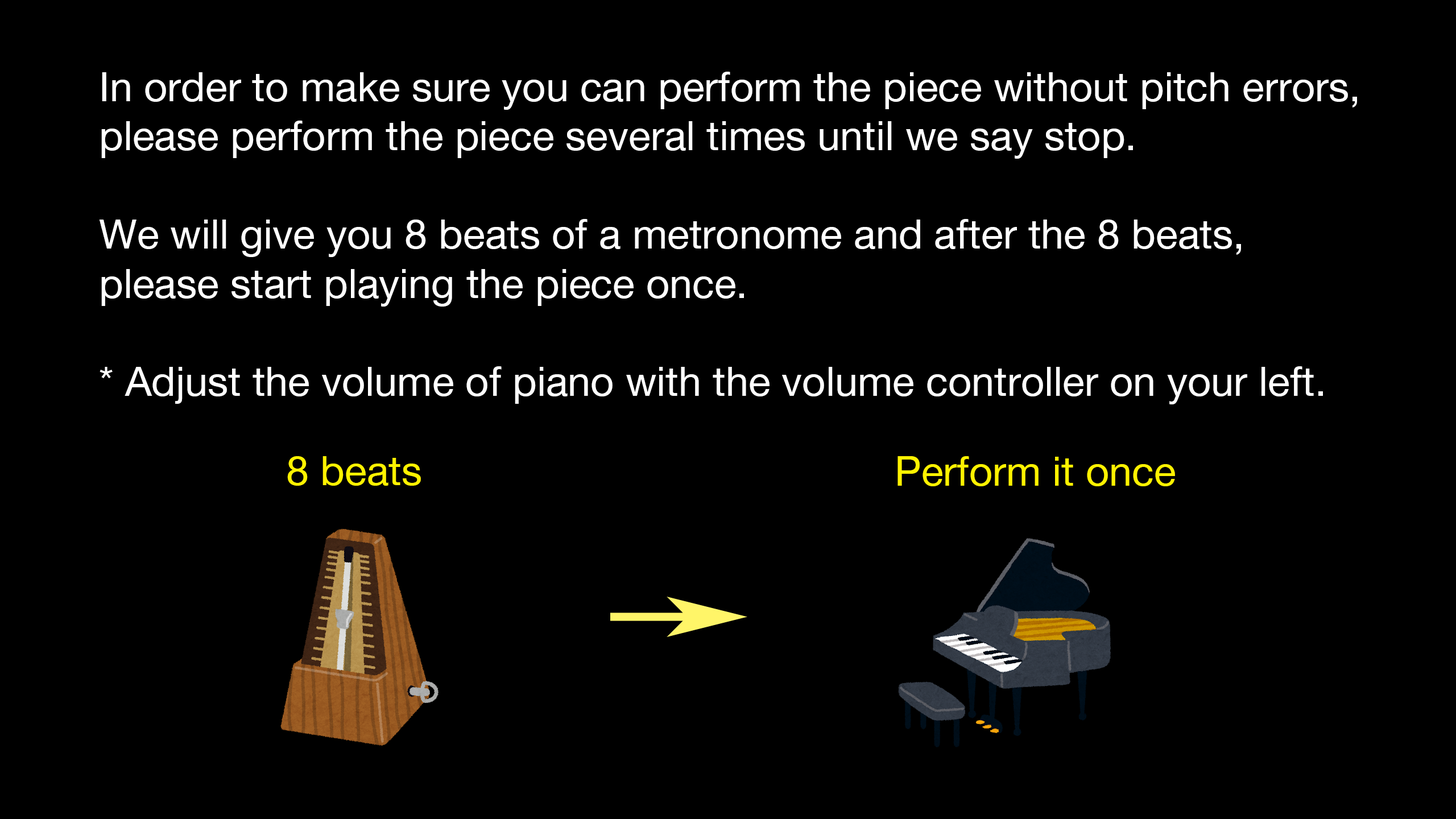
<style>
.page{position:relative;width:1456px;height:819px;background:#000000}
.page>*{position:absolute;margin:0}
.t1{font:40.9px "HelveticaNeue";color:#ffffff}
.t2{font:40.9px "HelveticaNeue";color:#fff200}
</style>
<div class="page">
<p class="t1" style="left:99px;top:72px;width:1258px;height:332px">In order to make sure you can perform the piece without pitch errors,<br>please perform the piece several times until we say stop.<br><br>We will give you 8 beats of a metronome and after the 8 beats,<br>please start playing the piece once.<br><br>* Adjust the volume of piano with the volume controller on your left.</p>
<p class="t2" style="left:287px;top:456px;width:134px;height:30px">8 beats</p>
<p class="t2" style="left:897px;top:456px;width:278px;height:30px">Perform it once</p>
</div>
